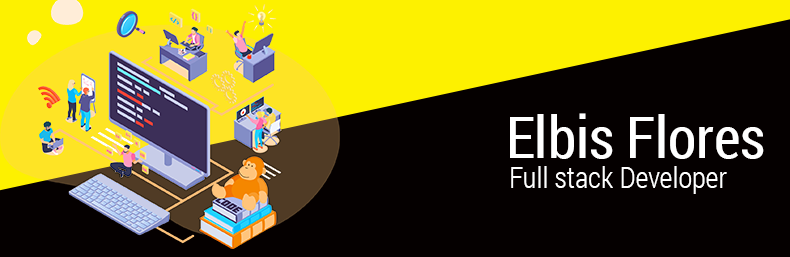
<style>
.page{position:relative;width:790px;height:257px;background:#050000}
.page>*{position:absolute;margin:0}
.t1{font:57.9px "RobotoCondensed-Regular";color:#ffffff}
.t2{font:28.9px "RobotoCondensed-Light";color:#ffffff}
</style>
<div class="page">
<p class="t1" style="left:510px;top:113px;width:254px;height:46px">Elbis Flores</p>
<p class="t2" style="left:511px;top:166px;width:216px;height:28px">Full stack Developer</p>
</div>
